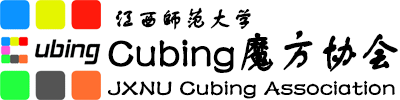
<style>
.page{position:relative;width:400px;height:100px;background:#ffffff}
.page>*{position:absolute;margin:0}
.t1{font:23px "FZSTK--GBK1-0";color:#000000;font-weight:bold}
.t2{font:23px/43px "FZSTK--GBK1-0";color:#000000;font-weight:bold;scale:1.05 1}
.t3{font:44px/43px "FZSTK--GBK1-0";color:#000000;font-weight:bold;scale:0.91 1}
</style>
<div class="page">
<p class="t1" style="left:115px;top:7px;width:136px;height:23px">江西師范大学</p>
<p class="t2" style="left:108px;top:30px;width:290px;height:69px"><span class="t3">Cubing魔方协会<br></span>JXNU Cubing Association</p>
</div>
